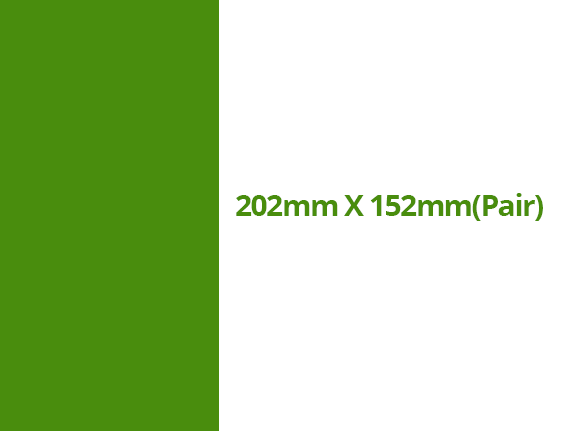
<style>
.page{position:relative;width:573px;height:431px;background:#ffffff}
.page>*{position:absolute;margin:0}
.t1{font:30px "OpenSans-Bold";letter-spacing:-0.05em;color:#498d0d}
</style>
<div class="page">
<p class="t1" style="left:236px;top:193px;width:307px;height:28px">202mm X 152mm(Pair)</p>
</div>
